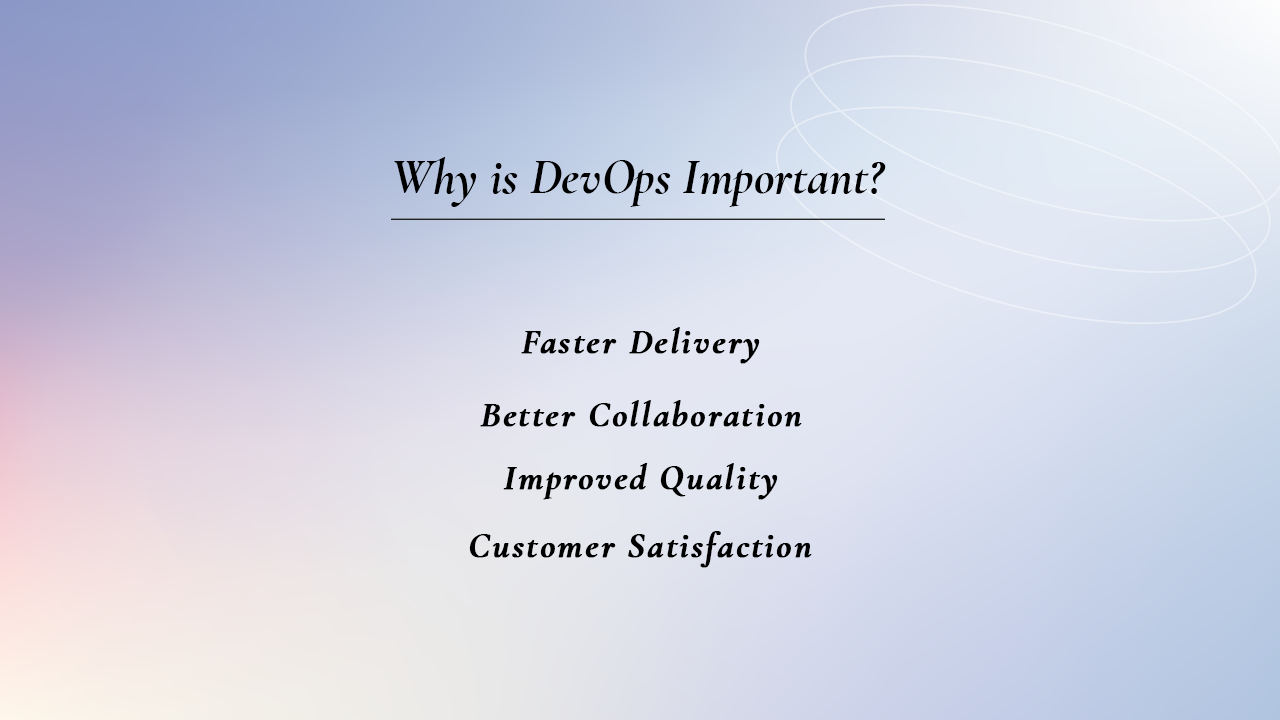
<style>
.page{position:relative;width:1280px;height:720px}
.page>*{position:absolute;margin:0}
.t1{font:50.1px "CormorantGaramond-BoldItalic";color:#000000}
.t2{font:36px "CormorantGaramond-BoldItalic";letter-spacing:0.05em;color:#000000;font-weight:bold}
</style>
<div class="page">
<p class="t1" style="left:394px;top:157px;width:492px;height:50px">Why is DevOps Important?</p>
<p class="t2" style="left:521px;top:327px;width:239px;height:37px">Faster Delivery</p>
<p class="t2" style="left:480px;top:400px;width:322px;height:27px">Better Collaboration</p>
<p class="t2" style="left:503px;top:463px;width:275px;height:37px">Improved Quality</p>
<p class="t2" style="left:469px;top:531px;width:343px;height:37px">Customer Satisfaction</p>
</div>
